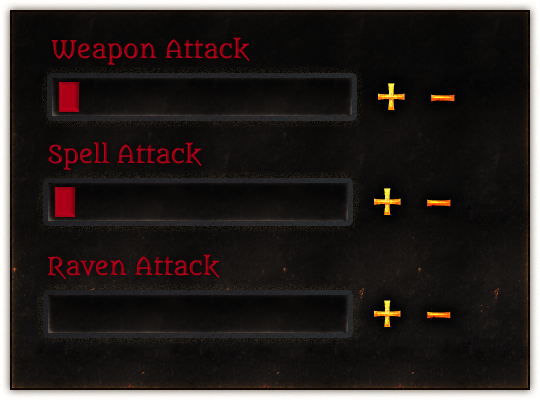
<style>
.page{position:relative;width:540px;height:400px}
.page>*{position:absolute;margin:0}
.t1{font:24px "Metamorphous"}
.t2{font:58px "Amarante-Regular"}
</style>
<div class="page">
<p class="t1" style="left:51px;top:37px;width:199px;height:28px">Weapon Attack</p>
<p class="t2" style="left:378px;top:83px;width:27px;height:27px">+</p>
<p class="t2" style="left:431px;top:94px;width:24px;height:8px">-</p>
<p class="t1" style="left:48px;top:142px;width:154px;height:28px">Spell Attack</p>
<p class="t2" style="left:374px;top:188px;width:27px;height:27px">+</p>
<p class="t2" style="left:427px;top:199px;width:24px;height:8px">-</p>
<p class="t1" style="left:48px;top:254px;width:172px;height:25px">Raven Attack</p>
</div>
